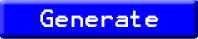
<style>
.page{position:relative;width:198px;height:39px;background:#0000ff}
.page>*{position:absolute;margin:0}
.t1{font:20px "Terminal";color:#ffffff}
</style>
<div class="page">
<p class="t1" style="left:40px;top:9px;width:118px;height:18px">Generate</p>
</div>
